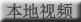
<style>
.page{position:relative;width:81px;height:22px}
.page>*{position:absolute;margin:0}
.t1{font:16.7px "SimSun";color:#3a3a3a}
</style>
<div class="page">
<p class="t1" style="left:6px;top:3px;width:66px;height:16px">本地视频</p>
</div>
